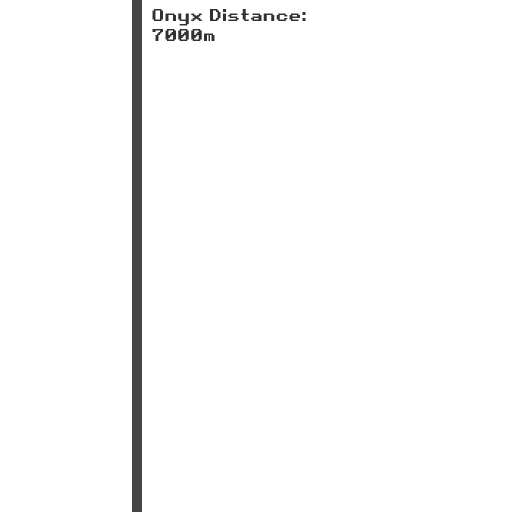
<style>
.page{position:relative;width:512px;height:512px;background:#ffffff}
.page>*{position:absolute;margin:0}
.t1{font:16.7px "RetroGaming";color:#333130}
</style>
<div class="page">
<p class="t1" style="left:152px;top:9px;width:154px;height:32px">Onyx Distance:<br>7000m</p>
</div>
